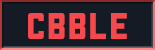
<style>
.page{position:relative;width:155px;height:50px;background:#151b24}
.page>*{position:absolute;margin:0}
.t1{font:36px "Cornerstone";color:#f5494d}
</style>
<div class="page">
<p class="t1" style="left:28px;top:13px;width:99px;height:26px">cbble</p>
</div>
